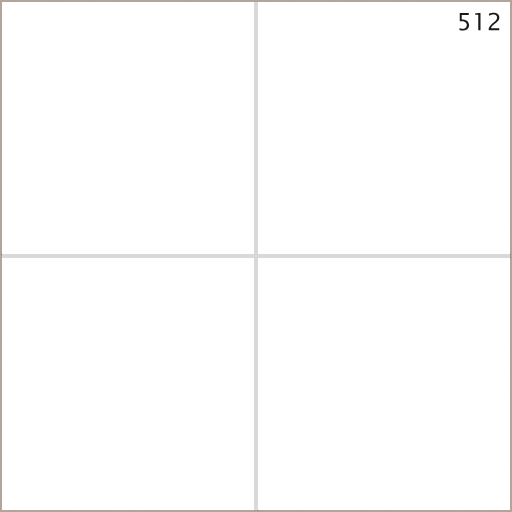
<style>
.page{position:relative;width:512px;height:512px;background:#ffffff}
.page>*{position:absolute;margin:0}
.t1{font:24px "LucidaSans";color:#1a1a1a;text-transform:uppercase}
</style>
<div class="page">
<p class="t1" style="left:459px;top:12px;width:41px;height:19px">512</p>
</div>
